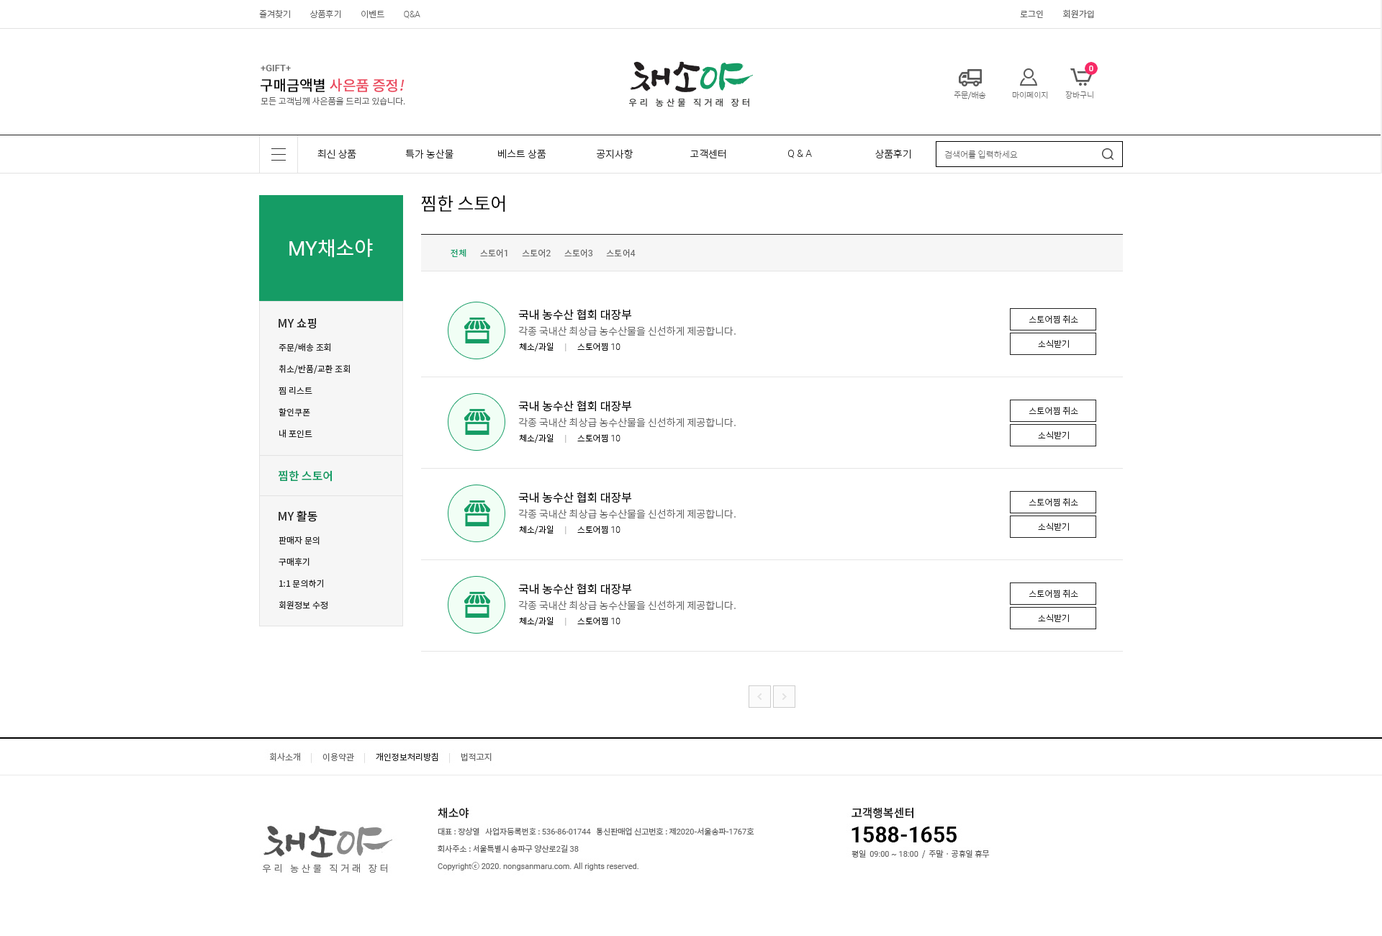
<style>
.page{position:relative;width:1382px;height:936px;background:#ffffff}
.page>*{position:absolute;margin:0}
.t1{font:8.6px "NotoSansCJKkr-Light";color:#666666}
.t2{font:8.6px "Roboto-Light";color:#666666}
.t3{font:8.6px "NotoSansCJKkr-DemiLight";color:#666666}
.t4{font:9.4px "Roboto-Medium";color:#666666}
.t5{font:14.4px "NotoSansCJKkr-Medium";color:#ea475c}
.t6{font:14.4px "NotoSansCJKkr-Medium";color:#000000}
.t7{font:14.4px "NotoSansCJKkr-Medium";color:#ea475c;font-style:italic}
.t8{font:7.9px "NotoSansCJKkr-Thin";color:#666666}
.t9{font:10.1px "NotoSansCJKkr-Light";color:#222222}
.t10{font:10.1px "Roboto-Light";color:#222222}
.t11{font:8.6px "NotoSansCJKkr-Thin";color:#666666}
.t12{font:18px "NotoSansCJKkr-Regular";color:#000000}
.t13{font:20.2px "NotoSansCJKkr-Regular";color:#ffffff}
.t14{font:20.2px "Roboto-Regular";color:#ffffff}
.t15{font:8.6px "NotoSansCJKkr-Regular";color:#666666}
.t16{font:8.6px "NotoSansCJKkr-Regular";color:#0b9a63}
.t17{font:8.6px "Roboto-Regular";color:#666666}
.t18{font:11.5px "NotoSansCJKkr-Medium";color:#222222}
.t19{font:11.5px "NotoSansCJKkr-Regular";color:#000000}
.t20{font:8.6px "NotoSansCJKkr-Light";color:#222222}
.t21{font:10.1px "NotoSansCJKkr-Light";color:#666666}
.t22{font:8.6px "NotoSansCJKkr-Light";color:#000000}
.t23{font:8.6px "Roboto-Light";color:#999999}
.t24{font:8.6px "Roboto-Light";color:#000000}
.t25{font:8.6px/21.6px "NotoSansCJKkr-Regular";color:#222222}
.t26{font:11.5px "NotoSansCJKkr-Medium";color:#159c65}
</style>
<div class="page">
<p class="t1" style="left:259px;top:9px;width:161px;height:10px">즐겨찾기          상품후기          이벤트          <span class="t2">Q&amp;A</span></p>
<p class="t3" style="left:1020px;top:9px;width:74px;height:10px">로그인          회원가입</p>
<p class="t4" style="left:261px;top:65px;width:30px;height:6px">+GIFT+</p>
<p class="t5" style="left:261px;top:78px;width:144px;height:14px"><span class="t6">구매금액별 </span>사은품 증정<span class="t7">!</span></p>
<p class="t1" style="left:261px;top:96px;width:144px;height:9px">모든 고객님께 사은품을 드리고 있습니다.</p>
<p class="t8" style="left:954px;top:91px;width:32px;height:8px">주문/배송</p>
<p class="t8" style="left:1012px;top:91px;width:36px;height:8px">마이페이지</p>
<p class="t8" style="left:1066px;top:91px;width:28px;height:8px">장바구니</p>
<p class="t9" style="left:318px;top:149px;width:38px;height:9px">최신 상품</p>
<p class="t9" style="left:405px;top:149px;width:49px;height:10px">특가 농산물</p>
<p class="t9" style="left:498px;top:149px;width:48px;height:10px">베스트 상품</p>
<p class="t9" style="left:597px;top:149px;width:37px;height:10px">공지사항</p>
<p class="t9" style="left:690px;top:149px;width:36px;height:10px">고객센터</p>
<p class="t10" style="left:788px;top:150px;width:24px;height:8px">Q &amp; A</p>
<p class="t9" style="left:876px;top:149px;width:36px;height:10px">상품후기</p>
<p class="t11" style="left:945px;top:150px;width:73px;height:9px">검색어를 입력하세요</p>
<p class="t12" style="left:421px;top:195px;width:84px;height:17px">찜한 스토어</p>
<p class="t13" style="left:289px;top:238px;width:84px;height:20px"><span class="t14">MY</span>채소야</p>
<p class="t15" style="left:451px;top:249px;width:185px;height:9px"><span class="t16">전체</span>       스토어<span class="t17">1</span>       스토어<span class="t17">2</span>       스토어<span class="t17">3</span>       스토어<span class="t17">4</span></p>
<p class="t18" style="left:279px;top:318px;width:37px;height:11px">MY 쇼핑</p>
<p class="t19" style="left:518px;top:309px;width:114px;height:11px">국내 농수산 협회 대장부</p>
<p class="t20" style="left:1029px;top:315px;width:50px;height:9px">스토어찜 취소</p>
<p class="t21" style="left:518px;top:326px;width:218px;height:10px">각종 국내산 최상급 농수산물을 신선하게 제공합니다.</p>
<p class="t22" style="left:519px;top:342px;width:102px;height:9px">체소/과일     <span class="t23">|     </span>스토어찜 <span class="t24">10</span></p>
<p class="t20" style="left:1038px;top:340px;width:31px;height:8px">소식받기</p>
<p class="t25" style="left:279px;top:343px;width:71px;height:95px">주문/배송 조회<br>취소/반품/교환 조회<br>찜 리스트<br>할인쿠폰<br>내 포인트</p>
<p class="t19" style="left:518px;top:400px;width:114px;height:12px">국내 농수산 협회 대장부</p>
<p class="t20" style="left:1029px;top:407px;width:50px;height:8px">스토어찜 취소</p>
<p class="t21" style="left:518px;top:418px;width:218px;height:10px">각종 국내산 최상급 농수산물을 신선하게 제공합니다.</p>
<p class="t22" style="left:519px;top:433px;width:102px;height:10px">체소/과일     <span class="t23">|     </span>스토어찜 <span class="t24">10</span></p>
<p class="t20" style="left:1038px;top:431px;width:31px;height:8px">소식받기</p>
<p class="t26" style="left:278px;top:470px;width:54px;height:12px">찜한 스토어</p>
<p class="t19" style="left:518px;top:492px;width:114px;height:11px">국내 농수산 협회 대장부</p>
<p class="t21" style="left:518px;top:509px;width:218px;height:10px">각종 국내산 최상급 농수산물을 신선하게 제공합니다.</p>
<p class="t20" style="left:1029px;top:498px;width:50px;height:9px">스토어찜 취소</p>
<p class="t18" style="left:279px;top:510px;width:39px;height:12px">MY 활동</p>
<p class="t22" style="left:519px;top:525px;width:102px;height:9px">체소/과일     <span class="t23">|     </span>스토어찜 <span class="t24">10</span></p>
<p class="t20" style="left:1038px;top:523px;width:31px;height:8px">소식받기</p>
<p class="t25" style="left:279px;top:536px;width:49px;height:73px">판매자 문의<br>구매후기<br>1:1 문의하기<br>회원정보 수정</p>
<p class="t19" style="left:518px;top:583px;width:114px;height:12px">국내 농수산 협회 대장부</p>
<p class="t20" style="left:1029px;top:590px;width:50px;height:8px">스토어찜 취소</p>
<p class="t21" style="left:518px;top:600px;width:218px;height:11px">각종 국내산 최상급 농수산물을 신선하게 제공합니다.</p>
<p class="t22" style="left:519px;top:616px;width:102px;height:10px">체소/과일     <span class="t23">|     </span>스토어찜 <span class="t24">10</span></p>
<p class="t20" style="left:1038px;top:614px;width:31px;height:8px">소식받기</p>
</div>
